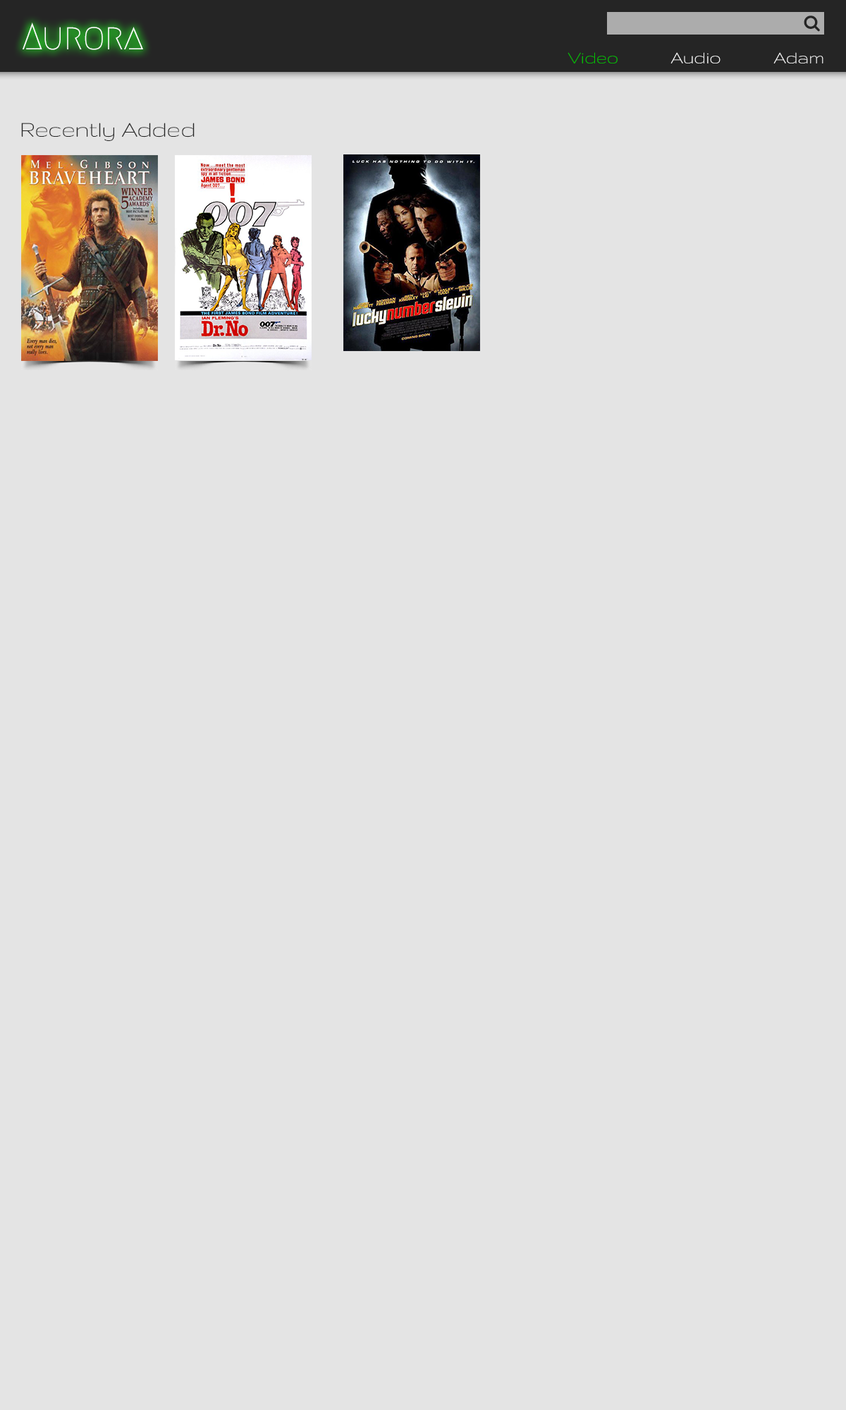
<style>
.page{position:relative;width:846px;height:1410px;background:#e4e4e4}
.page>*{position:absolute;margin:0}
.t1{font:38.1px "Megrim";letter-spacing:-0.02em;color:#ffffff}
.t2{font:19.7px "Gruppo";letter-spacing:-0.02em;color:#00c600}
.t3{font:19.7px "Gruppo";letter-spacing:-0.02em;color:#fefefe}
.t4{font:25.4px "Gruppo";letter-spacing:-0.02em;color:#252525}
</style>
<div class="page">
<p class="t1" style="left:23px;top:23px;width:120px;height:27px">Aurora</p>
<p class="t2" style="left:567px;top:52px;width:50px;height:11px">Video</p>
<p class="t3" style="left:670px;top:52px;width:50px;height:11px">Audio</p>
<p class="t3" style="left:773px;top:52px;width:50px;height:11px">Adam</p>
<p class="t4" style="left:21px;top:123px;width:174px;height:18px">Recently Added</p>
</div>
